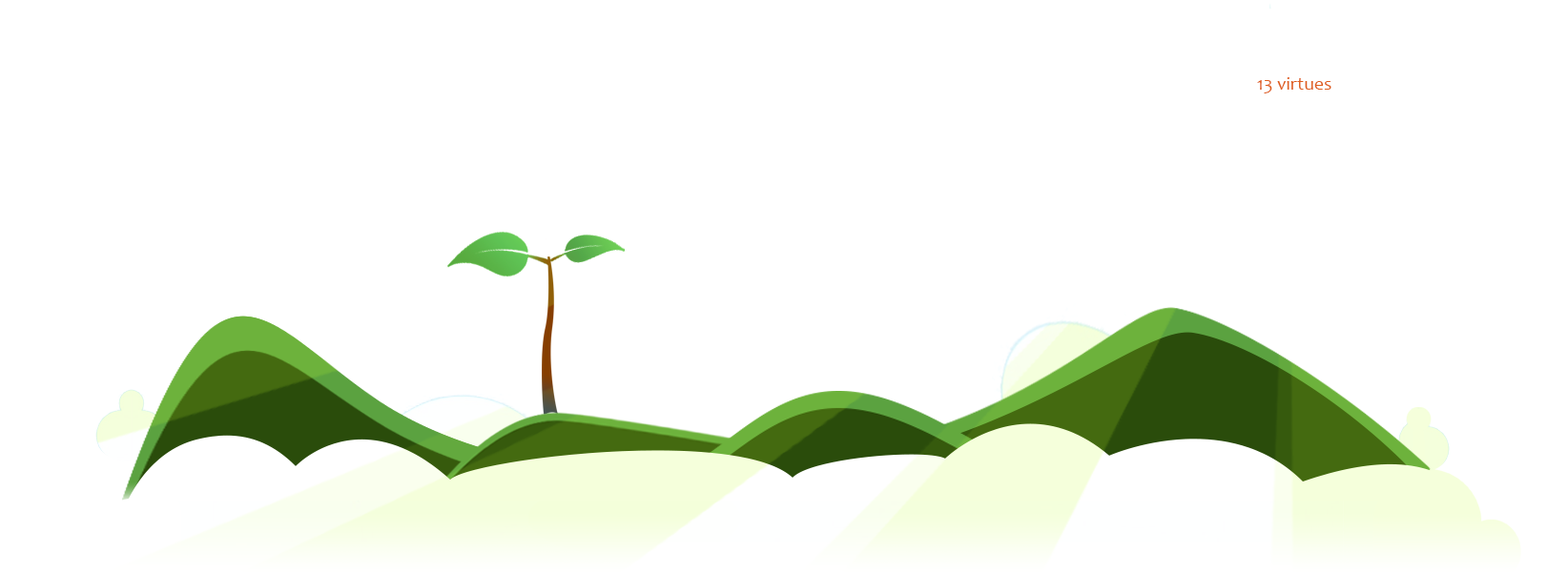
<style>
.page{position:relative;width:1568px;height:573px;background:#ffffff}
.page>*{position:absolute;margin:0}
.t1{font:19.1px "Candara";color:#df5f1e}
</style>
<div class="page">
<p class="t1" style="left:1257px;top:77px;width:74px;height:16px">13 virtues</p>
</div>
